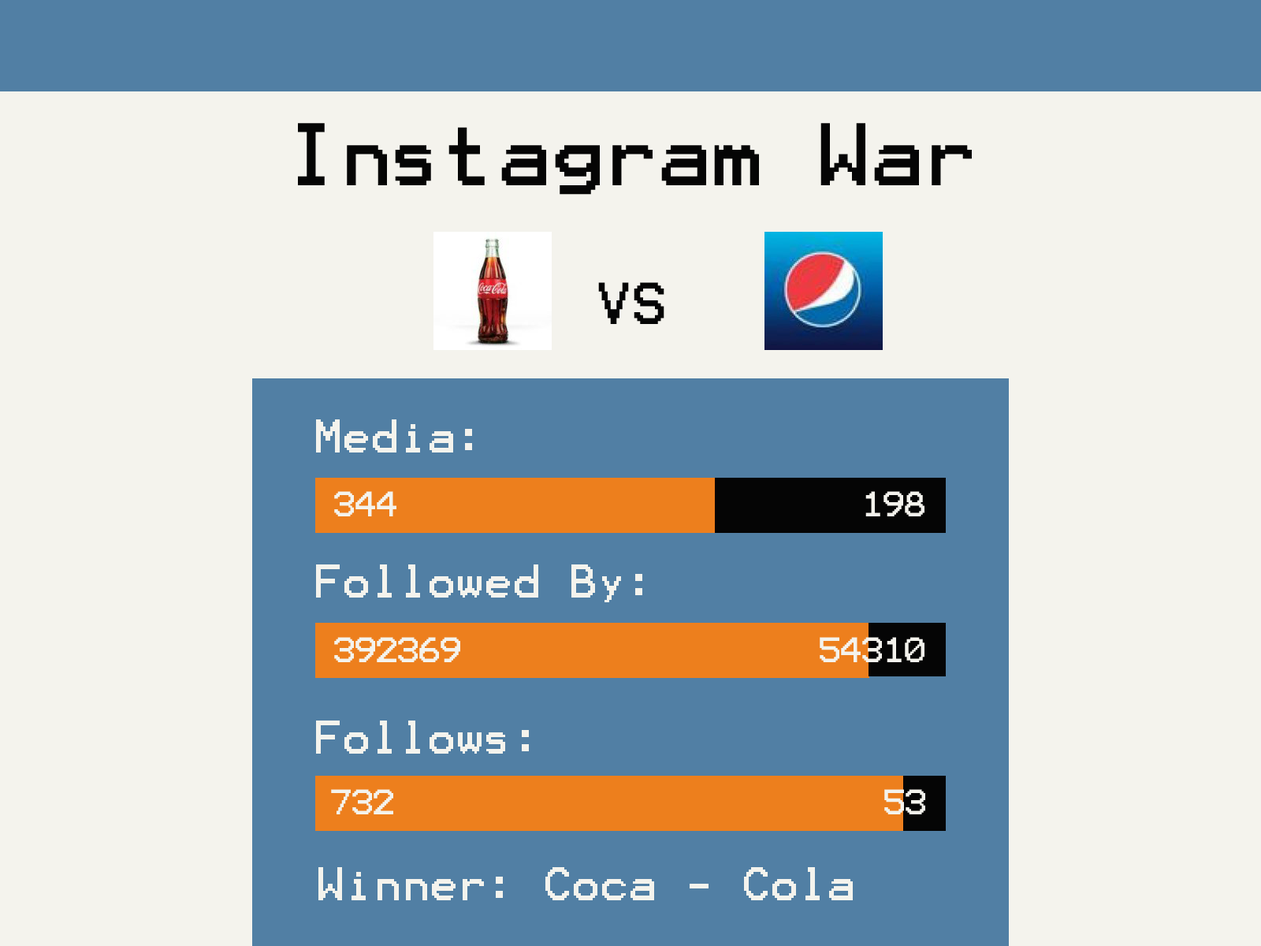
<style>
.page{position:relative;width:1261px;height:946px;background:#f4f3ed}
.page>*{position:absolute;margin:0}
.t1{font:70.9px "Terminal";color:#050505}
.t2{font:47.3px "Terminal";color:#050505}
.t3{font:37.8px "Terminal";color:#f4f3ed}
.t4{font:28.4px "Terminal";color:#f4f3ed}
</style>
<div class="page">
<p class="t1" style="left:298px;top:123px;width:674px;height:72px">Instagram War</p>
<p class="t2" style="left:598px;top:282px;width:66px;height:42px">VS</p>
<p class="t3" style="left:316px;top:419px;width:156px;height:33px">Media:</p>
<p class="t4" style="left:334px;top:491px;width:62px;height:25px">344</p>
<p class="t4" style="left:865px;top:491px;width:59px;height:25px">198</p>
<p class="t3" style="left:316px;top:564px;width:326px;height:38px">Followed By:</p>
<p class="t4" style="left:334px;top:637px;width:126px;height:25px">392369</p>
<p class="t4" style="left:820px;top:637px;width:104px;height:25px">54310</p>
<p class="t3" style="left:316px;top:720px;width:213px;height:33px">Follows:</p>
<p class="t4" style="left:331px;top:789px;width:62px;height:25px">732</p>
<p class="t4" style="left:884px;top:789px;width:41px;height:25px">53</p>
<p class="t3" style="left:318px;top:867px;width:535px;height:33px">Winner: Coca - Cola</p>
</div>
